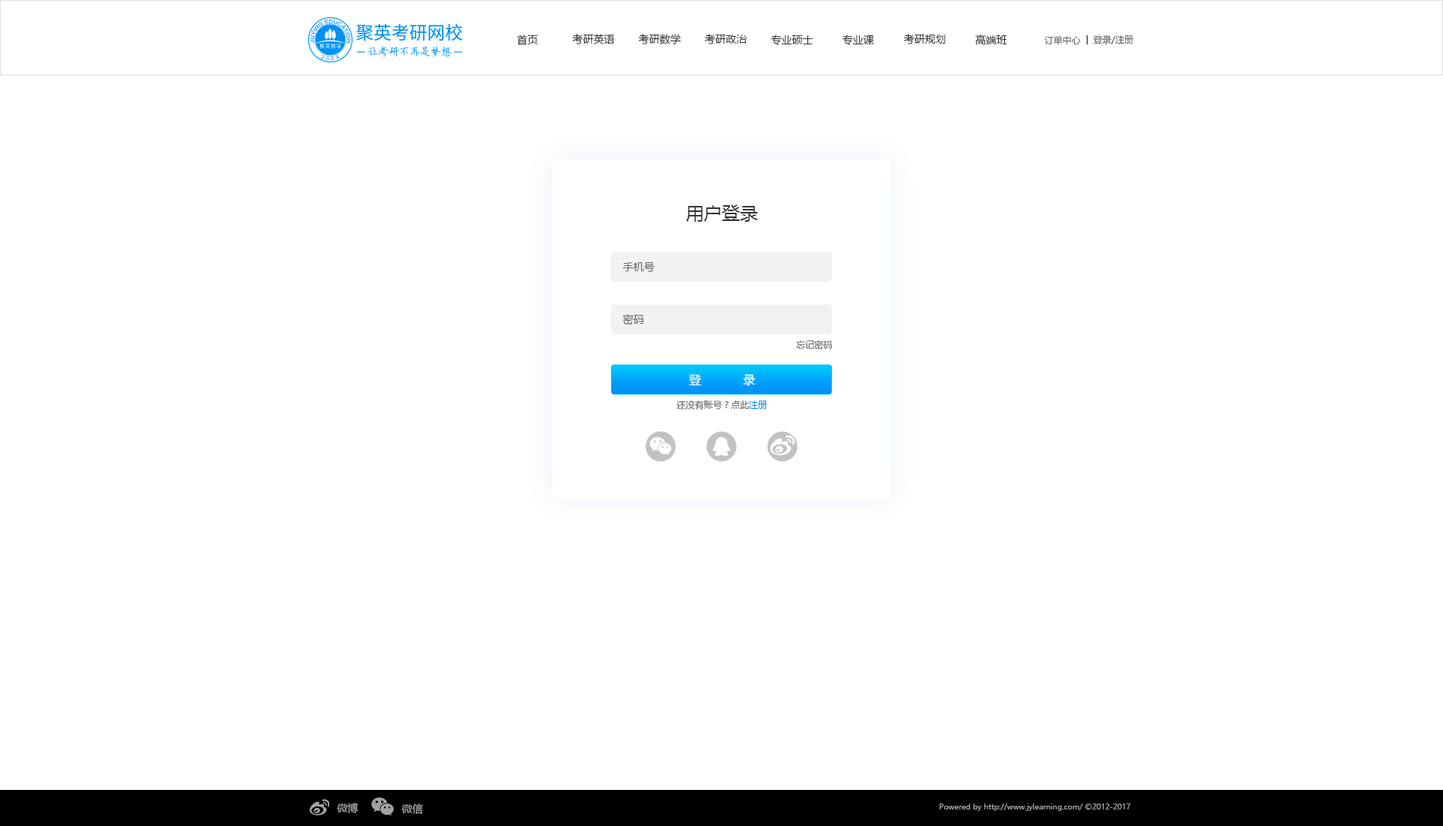
<style>
.page{position:relative;width:1443px;height:826px;background:#ffffff}
.page>*{position:absolute;margin:0}
.t1{font:10.5px "MicrosoftYaHei";color:#333333}
.t2{font:9px "MicrosoftYaHei";color:#666666}
.t3{font:18px "MicrosoftYaHei";color:#333333}
.t4{font:10.5px "MicrosoftYaHei";color:#666666}
.t5{font:12px "MicrosoftYaHei";color:#ffffff}
.t6{font:9px "MicrosoftYaHei";color:#0091f4}
.t7{font:10.5px "MicrosoftYaHei";color:#a1a1a1}
.t8{font:7.5px "MicrosoftYaHei";color:#a1a1a1}
</style>
<div class="page">
<p class="t1" style="left:517px;top:35px;width:21px;height:10px">首页</p>
<p class="t1" style="left:572px;top:34px;width:43px;height:10px">考研英语</p>
<p class="t1" style="left:638px;top:34px;width:43px;height:10px">考研数学</p>
<p class="t1" style="left:704px;top:34px;width:43px;height:10px">考研政治</p>
<p class="t1" style="left:771px;top:35px;width:42px;height:10px">专业硕士</p>
<p class="t1" style="left:843px;top:35px;width:31px;height:10px">专业课</p>
<p class="t1" style="left:904px;top:34px;width:42px;height:10px">考研规划</p>
<p class="t1" style="left:975px;top:35px;width:32px;height:10px">高端班</p>
<p class="t2" style="left:1044px;top:35px;width:37px;height:10px">订单中心</p>
<p class="t2" style="left:1093px;top:35px;width:41px;height:9px">登录/注册</p>
<p class="t3" style="left:686px;top:204px;width:73px;height:18px">用户登录</p>
<p class="t4" style="left:622px;top:262px;width:33px;height:10px">手机号</p>
<p class="t4" style="left:623px;top:314px;width:21px;height:11px">密码</p>
<p class="t2" style="left:796px;top:341px;width:36px;height:9px">忘记密码</p>
<p class="t5" style="left:689px;top:374px;width:66px;height:12px">登  录</p>
<p class="t2" style="left:677px;top:400px;width:91px;height:10px">还没有账号？点此<span class="t6">注册</span></p>
<p class="t7" style="left:337px;top:803px;width:22px;height:10px">微博</p>
<p class="t7" style="left:401px;top:804px;width:22px;height:10px">微信</p>
<p class="t8" style="left:940px;top:804px;width:191px;height:7px">Powered by http://www.jylearning.com/ ©2012-2017</p>
</div>
